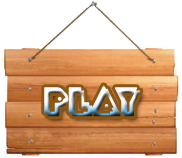
<style>
.page{position:relative;width:182px;height:158px;background:#ffffff}
.page>*{position:absolute;margin:0}
.t1{font:33.3px "CrackMan";font-weight:bold}
</style>
<div class="page">
<p class="t1" style="left:44px;top:85px;width:97px;height:32px">play</p>
</div>
